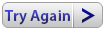
<style>
.page{position:relative;width:105px;height:31px}
.page>*{position:absolute;margin:0}
.t1{font:16px "MyriadPro-Semibold"}
</style>
<div class="page">
<p class="t1" style="left:4px;top:10px;width:66px;height:15px">Try Again</p>
</div>
